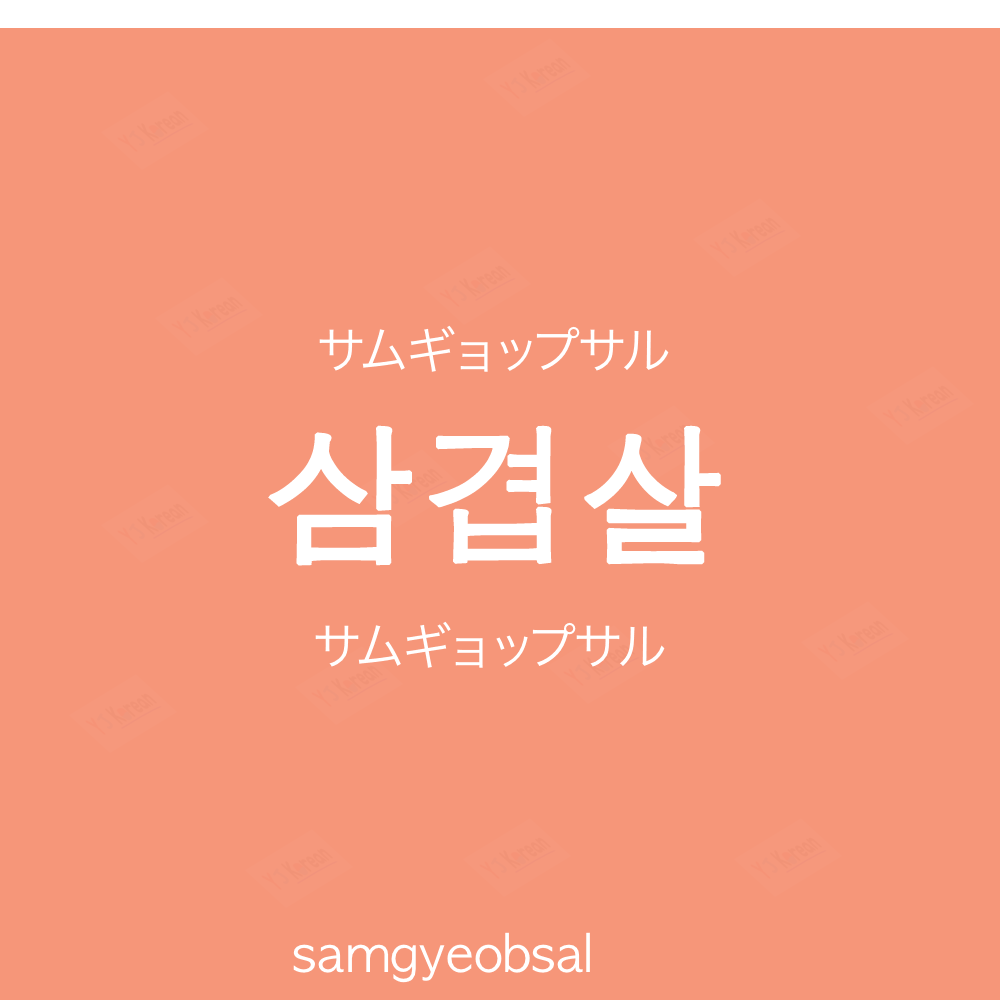
<style>
.page{position:relative;width:1000px;height:1000px;background:#f69679}
.page>*{position:absolute;margin:0}
.t1{font:50px "HiraKakuProN-W3";color:#ffffff}
.t2{font:150px "AppleGothic";color:#ffffff;font-weight:bold}
.t3{font:50px "AppleGothic";color:#ffffff}
</style>
<div class="page">
<p class="t1" style="left:319px;top:325px;width:350px;height:47px">サムギョップサル</p>
<p class="t2" style="left:268px;top:425px;width:453px;height:141px">삼겹살</p>
<p class="t1" style="left:315px;top:621px;width:350px;height:47px">サムギョップサル</p>
<p class="t3" style="left:293px;top:932px;width:297px;height:51px">samgyeobsal</p>
</div>
